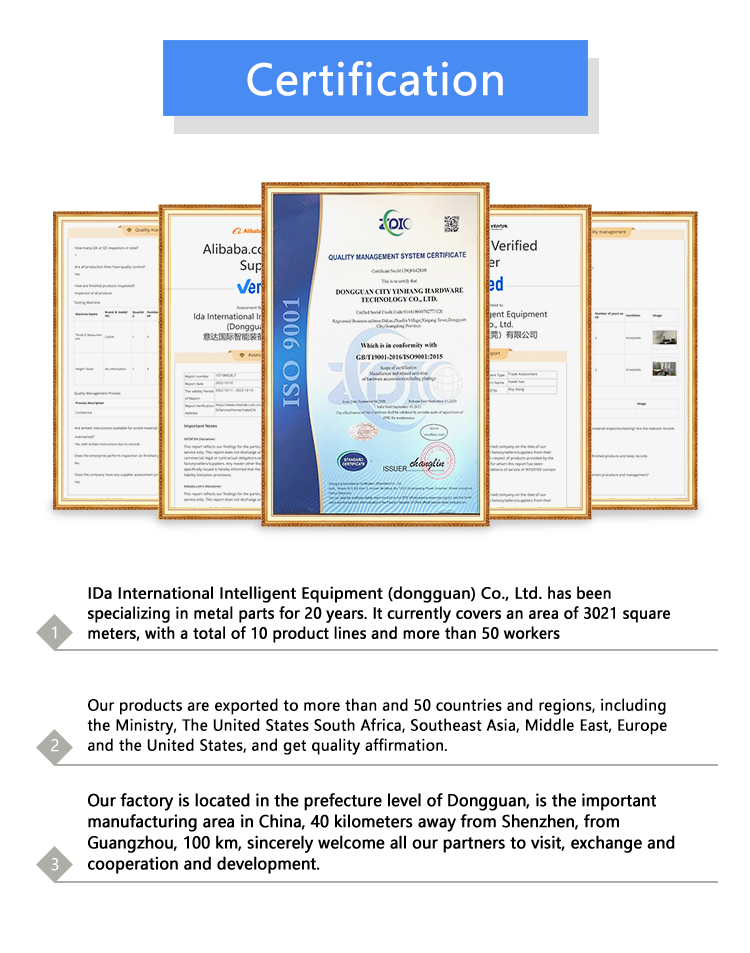
<style>
.page{position:relative;width:750px;height:953px;background:#ffffff}
.page>*{position:absolute;margin:0}
.t1{font:41.7px "MicrosoftYaHei";letter-spacing:0.005em;color:#ffffff;font-weight:bold}
.t2{font:15px/20px "MicrosoftYaHei";color:#000000;font-weight:bold;scale:0.95 1}
.t3{font:15px/20px "MicrosoftYaHei";color:#000000;font-weight:bold}
.t4{font:15.8px "MicrosoftYaHei";color:#ffffff;scale:0.95 1}
.t5{font:15.8px/21.1px "MicrosoftYaHei";color:#000000;font-weight:bold;scale:0.95 1}
</style>
<div class="page">
<p class="t1" style="left:247px;top:61px;width:256px;height:35px">Certification</p>
<p class="t2" style="left:88px;top:586px;width:582px;height:57px"><span class="t3">IDa International Intelligent Equipment (dongguan) Co., Ltd. </span>has been specializing in metal parts for 20 years. It currently covers an area of 3021 square meters, with a total of 10 product lines and more than 50 workers</p>
<p class="t4" style="left:52px;top:626px;width:5px;height:13px">1</p>
<p class="t2" style="left:87px;top:698px;width:580px;height:57px">Our products are exported to more than and 50 countries and regions, including the Ministry, The United States South Africa, Southeast Asia, Middle East, Europe and the United States, and get quality affirmation.</p>
<p class="t4" style="left:51px;top:739px;width:8px;height:13px">2</p>
<p class="t5" style="left:88px;top:793px;width:587px;height:81px">Our factory is located in the prefecture level of Dongguan, is the important manufacturing area in China, 40 kilometers away from Shenzhen, from Guangzhou, 100 km, sincerely welcome all our partners to visit, exchange and cooperation and development.</p>
<p class="t4" style="left:51px;top:858px;width:8px;height:13px">3</p>
</div>
